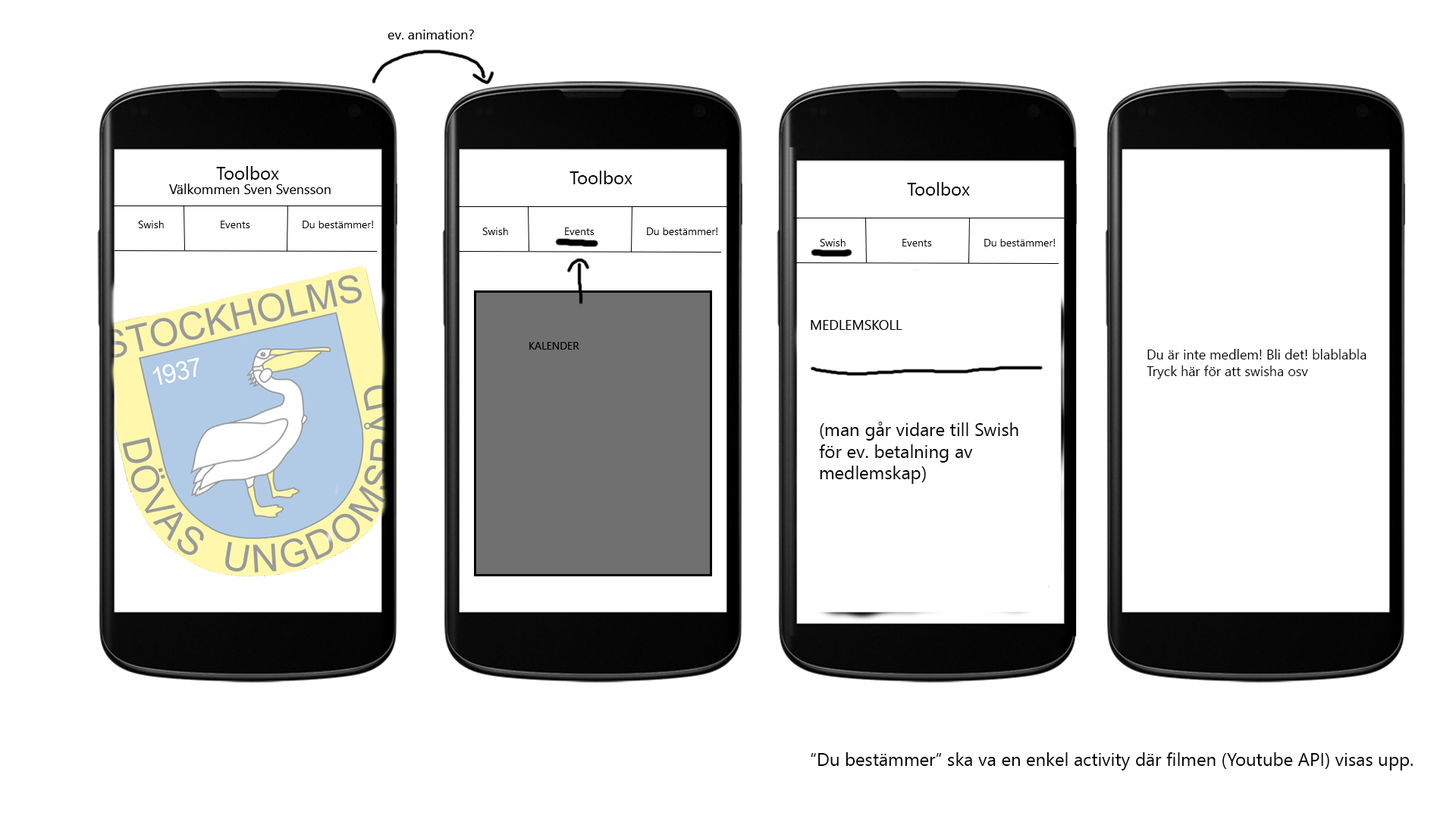
<style>
.page{position:relative;width:1456px;height:819px;background:#ffffff}
.page>*{position:absolute;margin:0}
.t1{font:18.2px "SegoeUI";color:#000000}
.t2{font:10.6px "SegoeUI";color:#000000}
.t3{font:13.6px "SegoeUI";color:#000000}
</style>
<div class="page">
<p class="t1" style="left:216px;top:166px;width:63px;height:14px">Toolbox</p>
<p class="t1" style="left:570px;top:171px;width:62px;height:13px">Toolbox</p>
<p class="t2" style="left:138px;top:221px;width:236px;height:7px">Swish   Events  Du bestämmer!</p>
<p class="t2" style="left:482px;top:227px;width:236px;height:8px">Swish   Events  Du bestämmer!</p>
<p class="t3" style="left:1147px;top:349px;width:219px;height:30px">Du är inte medlem! Bli det! blablabla<br>Tryck här för att swisha osv</p>
<p class="t1" style="left:819px;top:422px;width:199px;height:62px">(man går vidare till Swish för ev. betalning av medlemskap)</p>
<p class="t1" style="left:811px;top:752px;width:602px;height:18px">“Du bestämmer” ska va en enkel activity där filmen (Youtube API) visas upp.</p>
</div>
